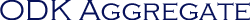
<style>
.page{position:relative;width:250px;height:20px;background:#ffffff}
.page>*{position:absolute;margin:0}
.t1{font:30px "CopperplateGothic-Light";color:#07115a}
</style>
<div class="page">
<p class="t1" style="left:0px;top:0px;width:250px;height:21px">ODK Aggregate</p>
</div>
